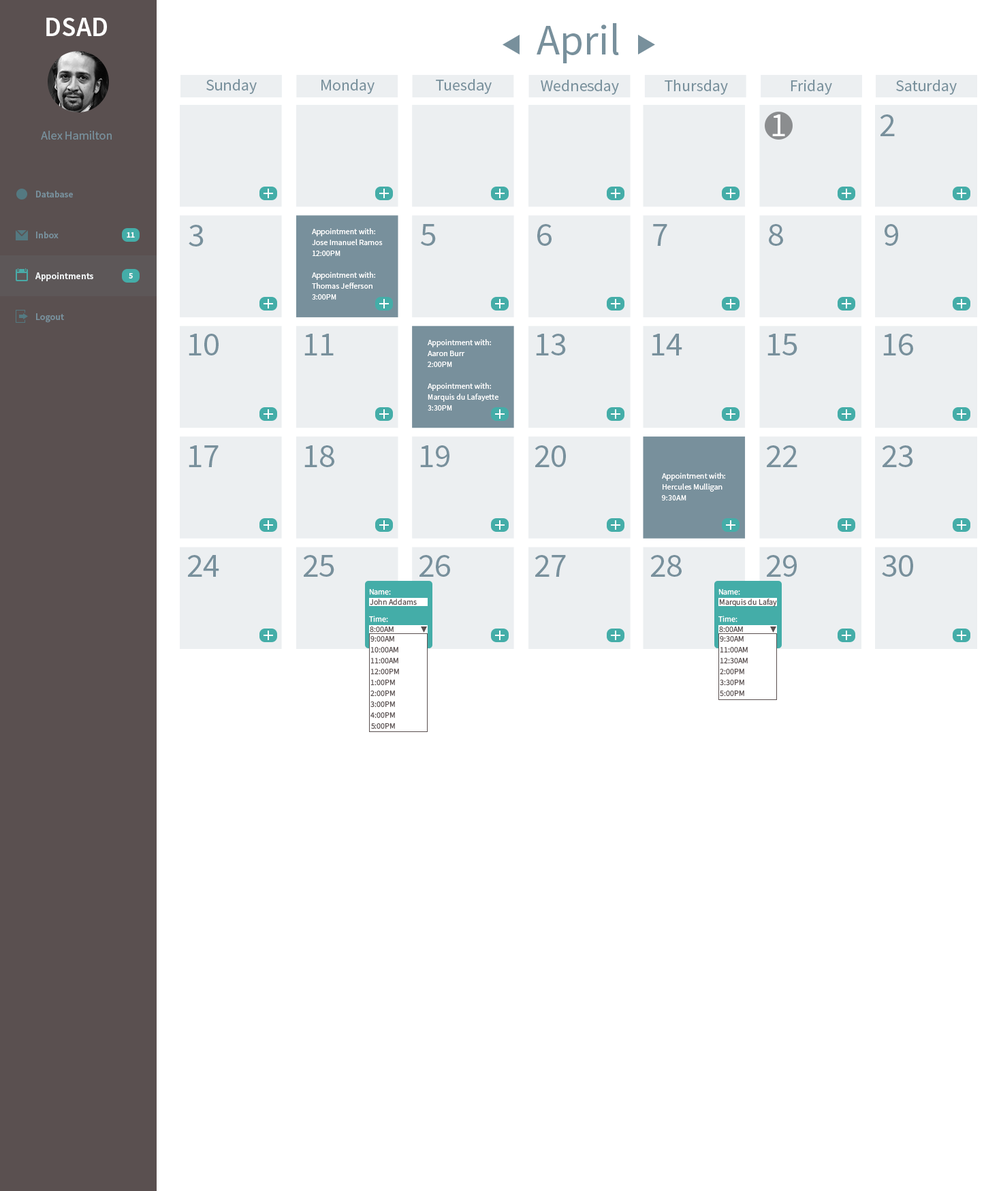
<style>
.page{position:relative;width:1001px;height:1191px;background:#ffffff}
.page>*{position:absolute;margin:0}
.t1{font:27.2px "SourceSansPro-Semibold";color:#ffffff}
.t2{font:42.9px "SourceSansPro-Regular";color:#78909c}
.t3{font:16.4px "SourceSansPro-Regular";color:#78909c}
.t4{font:34.1px "SourceSansPro-Regular";color:#ffffff}
.t5{font:34.1px "SourceSansPro-Regular";color:#78909c}
.t6{font:12.3px "SourceSansPro-Regular";color:#78909c}
.t7{font:9.5px "SourceSansPro-Semibold";color:#78909c}
.t8{font:8.2px "SourceSansPro-Bold";color:#f8fafb}
.t9{font:8.2px/10.9px "SourceSansPro-Regular";color:#ffffff}
.t10{font:9.5px "SourceSansPro-Semibold";color:#ffffff}
.t11{font:8.2px "SourceSansPro-Regular";color:#ffffff}
.t12{font:8.2px "SourceSansPro-Regular";color:#5a5050}
.t13{font:8.2px/10.9px "SourceSansPro-Regular";color:#5a5050}
</style>
<div class="page">
<p class="t1" style="left:46px;top:18px;width:61px;height:18px">DSAD</p>
<p class="t2" style="left:537px;top:23px;width:82px;height:40px">April</p>
<p class="t3" style="left:206px;top:79px;width:51px;height:15px">Sunday</p>
<p class="t3" style="left:321px;top:79px;width:54px;height:15px">Monday</p>
<p class="t3" style="left:436px;top:79px;width:56px;height:15px">Tuesday</p>
<p class="t3" style="left:541px;top:80px;width:78px;height:15px">Wednesday</p>
<p class="t3" style="left:665px;top:80px;width:63px;height:15px">Thursday</p>
<p class="t3" style="left:791px;top:80px;width:41px;height:15px">Friday</p>
<p class="t3" style="left:896px;top:80px;width:61px;height:15px">Saturday</p>
<p class="t4" style="left:772px;top:114px;width:13px;height:22px">1</p>
<p class="t5" style="left:880px;top:114px;width:15px;height:22px">2</p>
<p class="t6" style="left:41px;top:131px;width:71px;height:9px">Alex Hamilton</p>
<p class="t7" style="left:36px;top:191px;width:37px;height:6px">Database</p>
<p class="t7" style="left:36px;top:232px;width:23px;height:6px">Inbox</p>
<p class="t8" style="left:127px;top:232px;width:8px;height:6px">11</p>
<p class="t5" style="left:189px;top:225px;width:15px;height:22px">3</p>
<p class="t9" style="left:312px;top:228px;width:71px;height:72px">Appointment with:<br>Jose Imanuel Ramos<br>12:00PM<br><br>Appointment with:<br>Thomas Jefferson<br>3:00PM</p>
<p class="t5" style="left:421px;top:224px;width:15px;height:22px">5</p>
<p class="t5" style="left:537px;top:224px;width:15px;height:22px">6</p>
<p class="t5" style="left:653px;top:224px;width:14px;height:22px">7</p>
<p class="t5" style="left:769px;top:224px;width:14px;height:22px">8</p>
<p class="t5" style="left:885px;top:224px;width:13px;height:22px">9</p>
<p class="t10" style="left:35px;top:272px;width:58px;height:9px">Appointments</p>
<p class="t8" style="left:129px;top:273px;width:4px;height:6px">5</p>
<p class="t7" style="left:36px;top:313px;width:28px;height:10px">Logout</p>
<p class="t5" style="left:189px;top:334px;width:30px;height:21px">10</p>
<p class="t5" style="left:304px;top:334px;width:30px;height:21px">11</p>
<p class="t9" style="left:428px;top:339px;width:71px;height:72px">Appointment with:<br>Aaron Burr<br>2:00PM<br><br>Appointment with:<br>Marquis du Lafayette<br>3:30PM</p>
<p class="t5" style="left:536px;top:334px;width:30px;height:21px">13</p>
<p class="t5" style="left:652px;top:334px;width:30px;height:21px">14</p>
<p class="t5" style="left:768px;top:334px;width:29px;height:21px">15</p>
<p class="t5" style="left:883px;top:334px;width:30px;height:21px">16</p>
<p class="t5" style="left:189px;top:445px;width:30px;height:22px">17</p>
<p class="t5" style="left:304px;top:445px;width:30px;height:22px">18</p>
<p class="t5" style="left:420px;top:445px;width:29px;height:22px">19</p>
<p class="t5" style="left:535px;top:445px;width:31px;height:22px">20</p>
<p class="t5" style="left:766px;top:445px;width:31px;height:22px">22</p>
<p class="t5" style="left:882px;top:445px;width:31px;height:22px">23</p>
<p class="t9" style="left:662px;top:473px;width:63px;height:28px">Appointment with:<br>Hercules Mulligan<br>9:30AM</p>
<p class="t5" style="left:187px;top:555px;width:32px;height:22px">24</p>
<p class="t5" style="left:303px;top:555px;width:31px;height:22px">25</p>
<p class="t5" style="left:419px;top:555px;width:31px;height:22px">26</p>
<p class="t5" style="left:535px;top:555px;width:31px;height:22px">27</p>
<p class="t5" style="left:650px;top:555px;width:32px;height:22px">28</p>
<p class="t5" style="left:766px;top:555px;width:31px;height:22px">29</p>
<p class="t5" style="left:882px;top:555px;width:31px;height:22px">30</p>
<p class="t11" style="left:369px;top:589px;width:22px;height:6px">Name:</p>
<p class="t11" style="left:718px;top:589px;width:22px;height:6px">Name:</p>
<p class="t12" style="left:370px;top:599px;width:47px;height:6px">John Addams</p>
<p class="t12" style="left:719px;top:599px;width:58px;height:8px">Marquis du Lafay</p>
<p class="t11" style="left:369px;top:616px;width:19px;height:6px">Time:</p>
<p class="t11" style="left:718px;top:616px;width:20px;height:6px">Time:</p>
<p class="t12" style="left:370px;top:627px;width:24px;height:6px">8:00AM</p>
<p class="t12" style="left:719px;top:627px;width:24px;height:6px">8:00AM</p>
<p class="t13" style="left:370px;top:636px;width:29px;height:93px">9:00AM<br>10:00AM<br>11:00AM<br>12:00PM<br>1:00PM<br>2:00PM<br>3:00PM<br>4:00PM<br>5:00PM</p>
<p class="t13" style="left:720px;top:636px;width:28px;height:61px">9:30AM<br>11:00AM<br>12:30AM<br>2:00PM<br>3:30PM<br>5:00PM</p>
</div>
